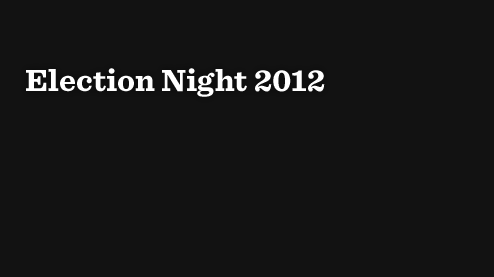
<style>
.page{position:relative;width:494px;height:277px;background:#121212}
.page>*{position:absolute;margin:0}
.t1{font:32px "Sentinel-Bold";letter-spacing:0.01em;color:#ffffff}
</style>
<div class="page">
<p class="t1" style="left:26px;top:68px;width:299px;height:29px">Election Night 2012</p>
</div>
